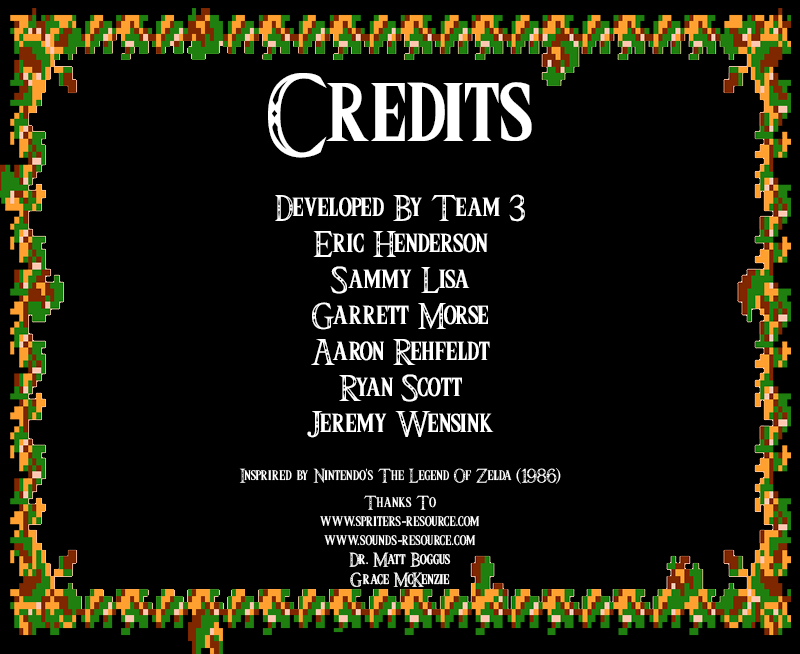
<style>
.page{position:relative;width:800px;height:654px;background:#000000}
.page>*{position:absolute;margin:0}
.t1{font:96px "Triforce";color:#ffffff}
.t2{font:30px "Triforce";color:#ffffff}
.t3{font:16px "Triforce";color:#ffffff}
</style>
<div class="page">
<p class="t1" style="left:268px;top:73px;width:264px;height:85px">Credits</p>
<p class="t2" style="left:275px;top:194px;width:250px;height:244px;text-align:center">Developed By Team 3<br>Eric Henderson<br>Sammy Lisa<br>Garrett Morse<br>Aaron Rehfeldt<br>Ryan Scott<br>Jeremy Wensink</p>
<p class="t3" style="left:349px;top:552px;width:102px;height:35px;text-align:center">Dr. Matt Boggus<br>Grace McKenzie</p>
</div>
